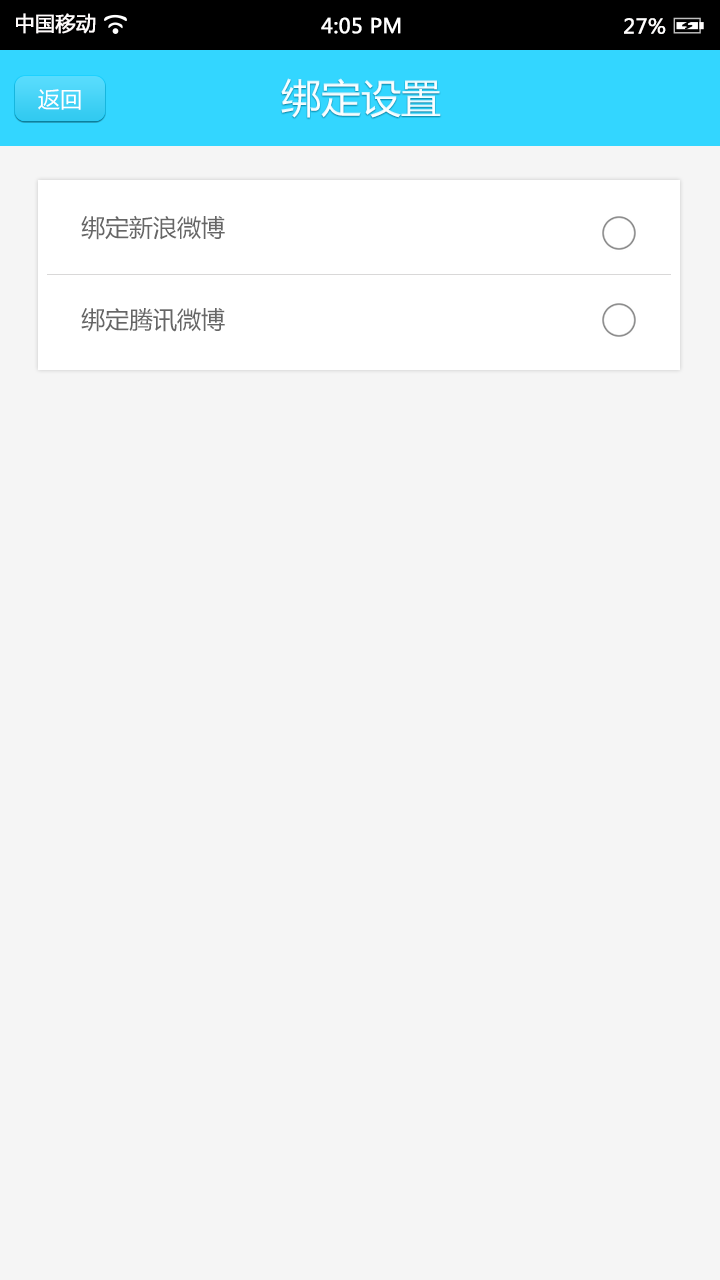
<style>
.page{position:relative;width:720px;height:1280px;background:#f5f5f5}
.page>*{position:absolute;margin:0}
.t1{font:20px "MicrosoftYaHei";color:#fffcfc;font-weight:bold}
.t2{font:20px "MicrosoftYaHei";color:#ffffff;font-weight:bold}
.t3{font:20px "MicrosoftYaHei";color:#fffefe;font-weight:bold}
.t4{font:40px "MicrosoftYaHei";color:#ffffff}
.t5{font:22px "MicrosoftYaHei";color:#ffffff}
.t6{font:24px "MicrosoftYaHei";color:#666666}
</style>
<div class="page">
<p class="t1" style="left:16px;top:13px;width:80px;height:21px">中国移动</p>
<p class="t2" style="left:321px;top:17px;width:80px;height:17px">4:05 PM</p>
<p class="t3" style="left:624px;top:18px;width:42px;height:16px">27%</p>
<p class="t4" style="left:281px;top:78px;width:160px;height:40px">绑定设置</p>
<p class="t5" style="left:38px;top:89px;width:43px;height:21px">返回</p>
<p class="t6" style="left:81px;top:215px;width:144px;height:25px">绑定新浪微博</p>
<p class="t6" style="left:81px;top:308px;width:144px;height:24px">绑定腾讯微博</p>
</div>
